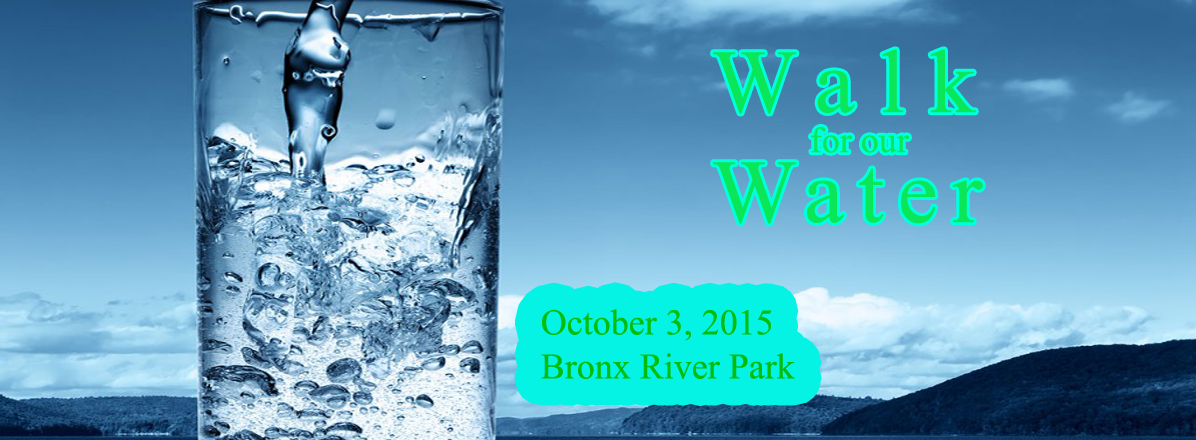
<style>
.page{position:relative;width:1196px;height:440px}
.page>*{position:absolute;margin:0}
.t1{font:36px/40px "TimesNewRomanPSMT";color:#0be558}
.t2{font:90px "TimesNewRomanPSMT";letter-spacing:0.28em;color:#0be558}
.t3{font:90px/70px "TimesNewRomanPSMT";letter-spacing:0.16em;color:#0be558}
.t4{font:36px/44px "TimesNewRomanPSMT";color:#03bd0c}
</style>
<div class="page">
<p class="t1" style="left:713px;top:49px;width:270px;height:175px"><span class="t2">Walk<br></span>for our <br><span class="t3">Water</span></p>
<p class="t4" style="left:541px;top:309px;width:254px;height:70px">October 3, 2015<br>Bronx River Park</p>
</div>
